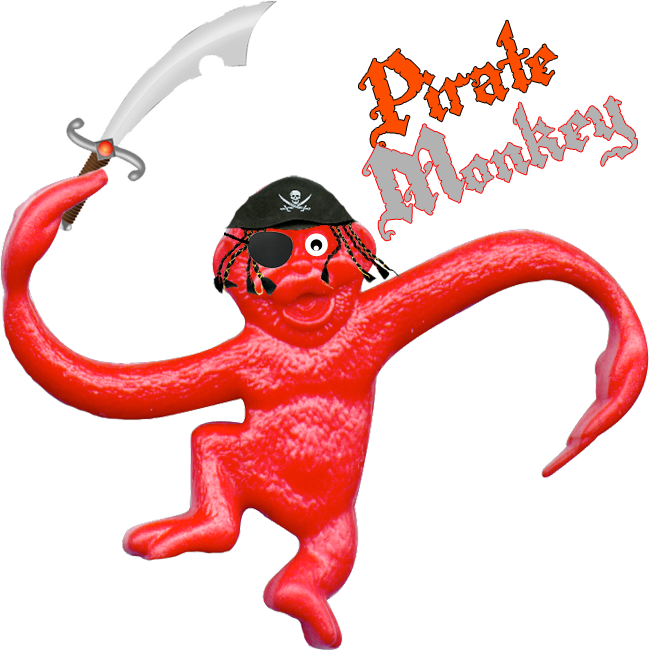
<style>
.page{position:relative;width:650px;height:650px;background:#ffffff}
.page>*{position:absolute;margin:0}
.t1{font:120px "Rapscallion";color:#fd4d00;scale:0.96 1}
.t2{font:120px "Rapscallion";color:#b2b2b2;scale:0.96 1}
</style>
<div class="page">
<p class="t1" style="left:359px;top:20px;width:199px;height:133px;rotate:-19deg">Pirate</p>
<p class="t2" style="left:362px;top:96px;width:275px;height:145px;rotate:-22deg">Monkey</p>
</div>
